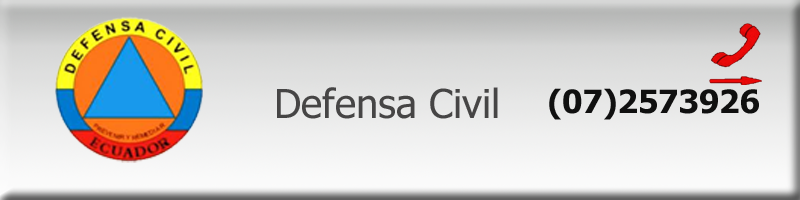
<style>
.page{position:relative;width:800px;height:200px}
.page>*{position:absolute;margin:0}
.t1{font:40px "Tahoma";color:#464545}
.t2{font:32px "Tahoma-Bold";color:#101010}
</style>
<div class="page">
<p class="t1" style="left:277px;top:87px;width:221px;height:32px">Defensa Civil</p>
<p class="t2" style="left:549px;top:88px;width:210px;height:32px">(07)2573926</p>
</div>
